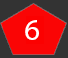
<style>
.page{position:relative;width:68px;height:58px;background:#fa0505}
.page>*{position:absolute;margin:0}
.t1{font:30px "MyriadPro-Regular";color:#ffffff}
</style>
<div class="page">
<p class="t1" style="left:25px;top:20px;width:14px;height:20px">6</p>
</div>
